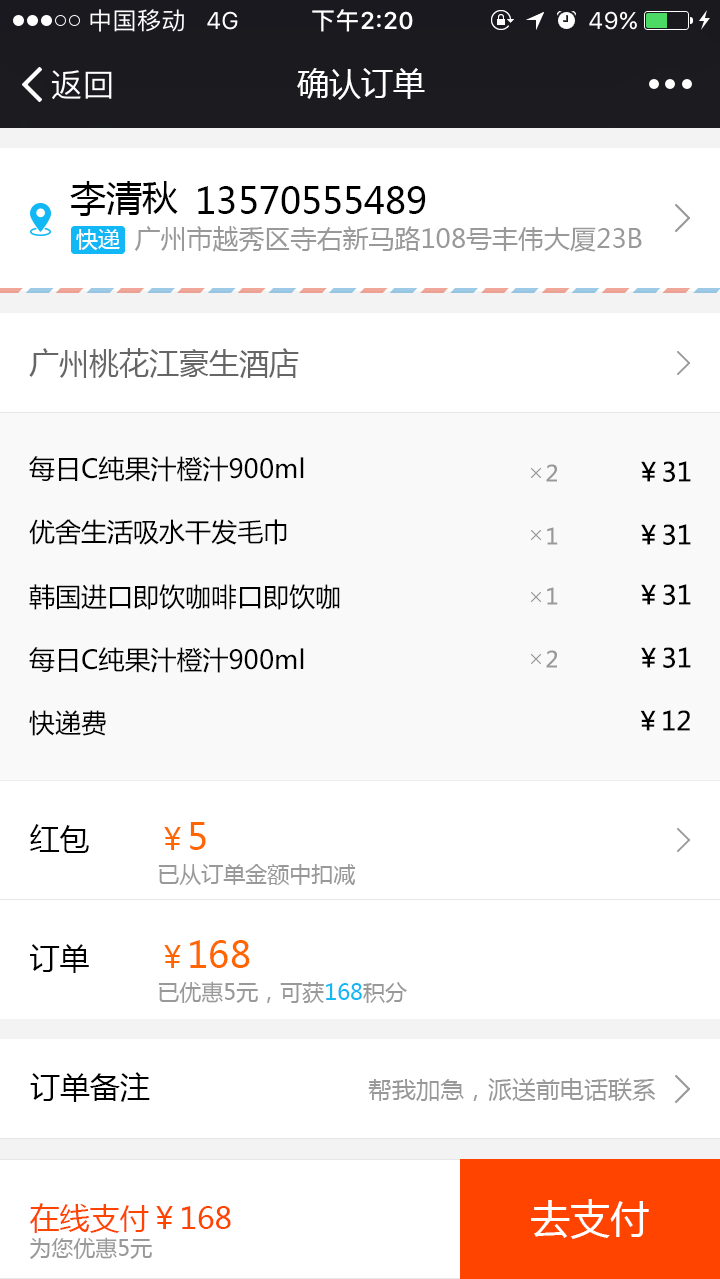
<style>
.page{position:relative;width:720px;height:1279px;background:#ffffff}
.page>*{position:absolute;margin:0}
.t1{font:32px "MicrosoftYaHei";color:#ffffff}
.t2{font:36px "MicrosoftYaHei";color:#000000}
.t3{font:22px "MicrosoftYaHei";color:#ffffff}
.t4{font:26px "MicrosoftYaHei";color:#999999}
.t5{font:30px "MicrosoftYaHei";color:#666666}
.t6{font:26px "MicrosoftYaHei";color:#000000}
.t7{font:22px "MicrosoftYaHei";color:#999999}
.t8{font:22px/44px "MicrosoftYaHei";color:#999999}
.t9{font:30px/44px "MicrosoftYaHei";color:#ff6600}
.t10{font:36px/44px "MicrosoftYaHei";color:#ff6600}
.t11{font:30px "MicrosoftYaHei";color:#000000}
.t12{font:22px/44px "MicrosoftYaHei";color:#12b7f5}
.t13{font:24px "MicrosoftYaHei";color:#999999}
.t14{font:30px/34px "MicrosoftYaHei";color:#ff4400}
.t15{font:22px/34px "MicrosoftYaHei";color:#999999}
.t16{font:40px "MicrosoftYaHei";color:#ffffff}
</style>
<div class="page">
<p class="t1" style="left:297px;top:68px;width:128px;height:32px">确认订单</p>
<p class="t2" style="left:70px;top:181px;width:108px;height:35px">李清秋</p>
<p class="t2" style="left:198px;top:186px;width:228px;height:28px">13570555489</p>
<p class="t3" style="left:76px;top:229px;width:44px;height:21px">快递</p>
<p class="t3" style="left:76px;top:229px;width:44px;height:21px">快递</p>
<p class="t4" style="left:134px;top:226px;width:508px;height:26px">广州市越秀区寺右新马路108号丰伟大厦23B</p>
<p class="t5" style="left:29px;top:348px;width:270px;height:30px">广州桃花江豪生酒店</p>
<p class="t6" style="left:29px;top:456px;width:275px;height:26px">每日C纯果汁橙汁900ml</p>
<p class="t6" style="left:641px;top:461px;width:50px;height:21px">￥31</p>
<p class="t7" style="left:546px;top:464px;width:11px;height:18px">2</p>
<p class="t6" style="left:29px;top:519px;width:258px;height:26px">优舍生活吸水干发毛巾</p>
<p class="t7" style="left:547px;top:527px;width:11px;height:18px">1</p>
<p class="t6" style="left:641px;top:524px;width:50px;height:21px">￥31</p>
<p class="t6" style="left:29px;top:584px;width:311px;height:26px">韩国进口即饮咖啡口即饮咖</p>
<p class="t7" style="left:547px;top:587px;width:11px;height:18px">1</p>
<p class="t6" style="left:641px;top:584px;width:50px;height:21px">￥31</p>
<p class="t6" style="left:29px;top:647px;width:275px;height:26px">每日C纯果汁橙汁900ml</p>
<p class="t7" style="left:546px;top:650px;width:11px;height:18px">2</p>
<p class="t6" style="left:641px;top:647px;width:50px;height:21px">￥31</p>
<p class="t6" style="left:29px;top:710px;width:77px;height:26px">快递费</p>
<p class="t6" style="left:640px;top:710px;width:50px;height:21px">￥12</p>
<p class="t8" style="left:158px;top:822px;width:198px;height:63px"><span class="t9">￥</span><span class="t10">5<br></span>已从订单金额中扣减</p>
<p class="t11" style="left:30px;top:824px;width:59px;height:29px">红包</p>
<p class="t8" style="left:158px;top:940px;width:249px;height:63px"><span class="t9">￥</span><span class="t10">168<br></span>已优惠5元，可获<span class="t12">168</span>积分</p>
<p class="t11" style="left:30px;top:944px;width:59px;height:29px">订单</p>
<p class="t11" style="left:30px;top:1072px;width:120px;height:30px">订单备注</p>
<p class="t13" style="left:368px;top:1078px;width:288px;height:23px">帮我加急，派送前电话联系</p>
<p class="t14" style="left:29px;top:1203px;width:202px;height:56px">在线支付￥168<br><span class="t15">为您优惠5元</span></p>
<p class="t16" style="left:531px;top:1199px;width:118px;height:40px">去支付</p>
</div>
